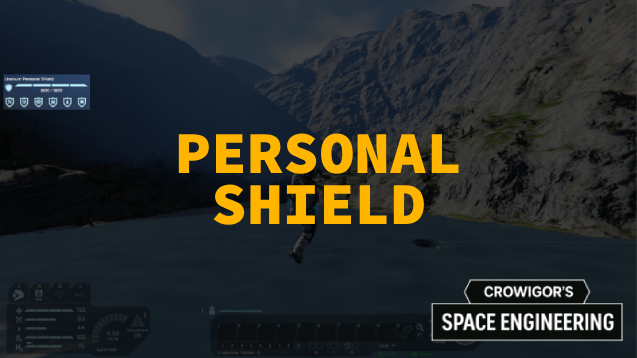
<style>
.page{position:relative;width:637px;height:358px}
.page>*{position:absolute;margin:0}
.t1{font:59.7px/51.7px "SourceCodePro-Black";color:#ffb400}
</style>
<div class="page">
<p class="t1" style="left:178px;top:133px;width:281px;height:92px;text-align:center">PERSONAL<br>SHIELD</p>
</div>
